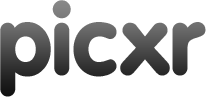
<style>
.page{position:relative;width:206px;height:97px;background:#ffffff}
.page>*{position:absolute;margin:0}
.t1{font:96px "VAGRoundedBlackSSiBlack";letter-spacing:-0.01em}
.t2{font:96px "VAGRoundedBlackSSiBlack";letter-spacing:0.05em}
.t3{font:96px "VAGRoundedBlackSSiBlack";letter-spacing:0.005em}
.t4{font:96px "VAGRoundedBlackSSiBlack";letter-spacing:-0.025em}
</style>
<div class="page">
<p class="t1" style="left:0px;top:0px;width:206px;height:97px">pi<span class="t2">c</span><span class="t3">x</span><span class="t4">r</span></p>
</div>
